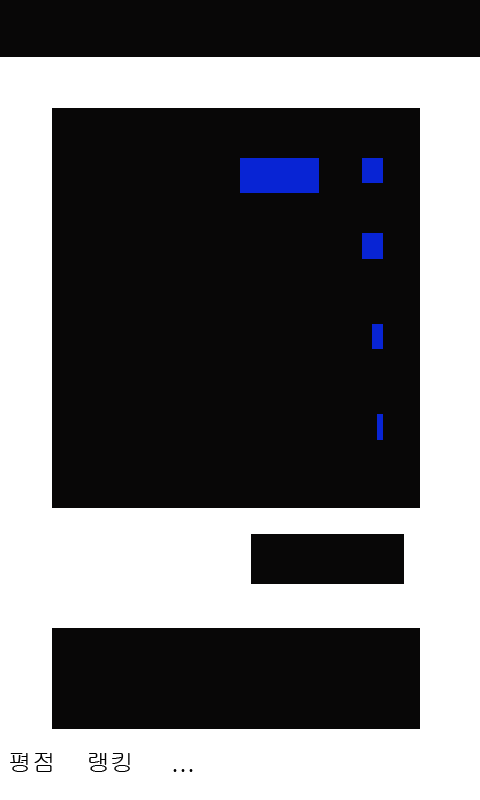
<style>
.page{position:relative;width:480px;height:800px;background:#080707}
.page>*{position:absolute;margin:0}
.t1{font:24px "Gulim";color:#000000}
</style>
<div class="page">
<p class="t1" style="left:8px;top:750px;width:57px;height:39px">평점</p>
<p class="t1" style="left:86px;top:750px;width:64px;height:25px">랭킹</p>
<p class="t1" style="left:171px;top:750px;width:108px;height:50px">...</p>
</div>
